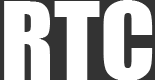
<style>
.page{position:relative;width:155px;height:80px;background:#ffffff}
.page>*{position:absolute;margin:0}
.t1{font:100px "Impact";color:#ffffff}
</style>
<div class="page">
<p class="t1" style="left:4px;top:0px;width:149px;height:81px">RTC</p>
</div>
